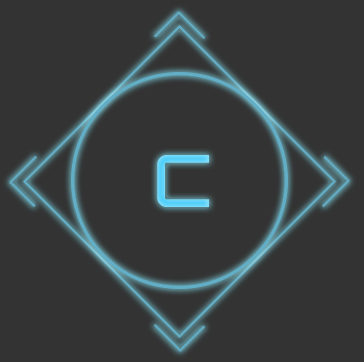
<style>
.page{position:relative;width:364px;height:362px;background:#333333}
.page>*{position:absolute;margin:0}
.t1{font:72px "Orbitron-Medium";color:#5fd3f9;text-transform:uppercase}
</style>
<div class="page">
<p class="t1" style="left:157px;top:155px;width:52px;height:52px">C</p>
</div>
